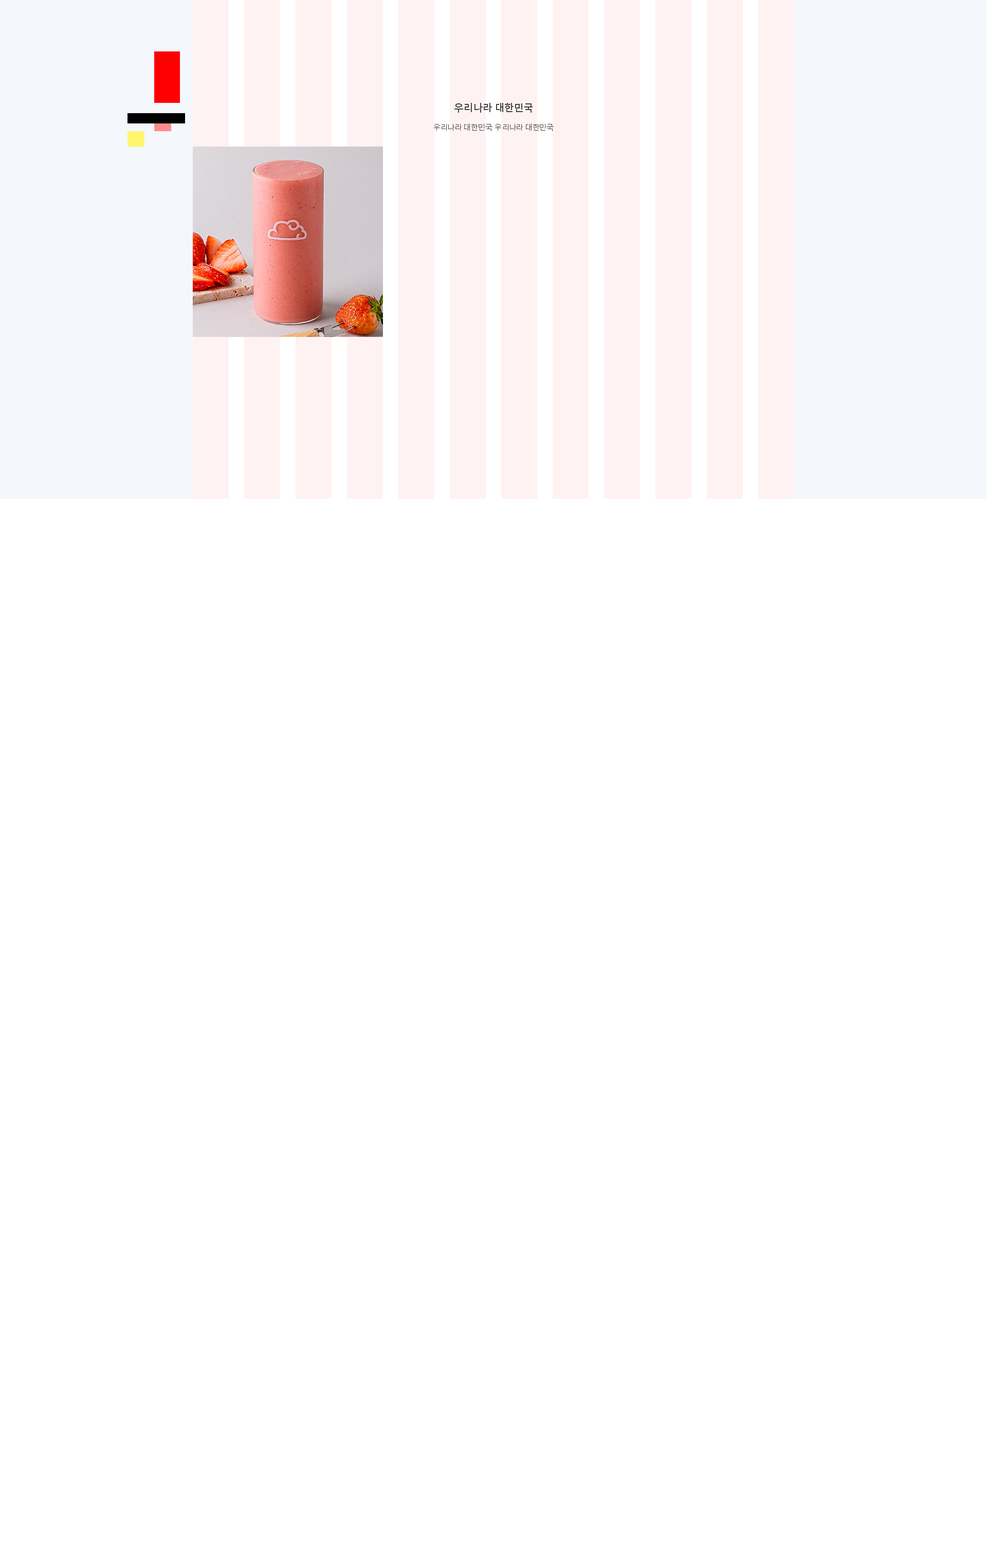
<style>
.page{position:relative;width:987px;height:1543px;background:#ffffff}
.page>*{position:absolute;margin:0}
.t1{font:10.3px "NotoSansKR-Medium";color:#444444}
.t2{font:7.7px "NotoSansKR-Light";color:#444444}
</style>
<div class="page">
<p class="t1" style="left:455px;top:103px;width:78px;height:10px">우리나라 대한민국</p>
<p class="t2" style="left:434px;top:123px;width:120px;height:8px">우리나라 대한민국 우리나라 대한민국</p>
</div>
